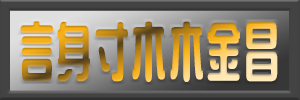
<style>
.page{position:relative;width:300px;height:100px}
.page>*{position:absolute;margin:0}
.t1{font:69.3px "JetLink-MediumRoundArt";scale:0.54 1}
</style>
<div class="page">
<p class="t1" style="left:20px;top:21px;width:258px;height:61px">言身寸木木金昌</p>
</div>
